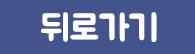
<style>
.page{position:relative;width:195px;height:54px;background:#43548c}
.page>*{position:absolute;margin:0}
.t1{font:36px "BMJUA";color:#ffffff}
</style>
<div class="page">
<p class="t1" style="left:41px;top:12px;width:116px;height:30px">뒤로가기</p>
</div>
